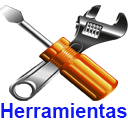
<style>
.page{position:relative;width:128px;height:128px;background:#ffffff}
.page>*{position:absolute;margin:0}
.t1{font:20px "Arial-BoldMT";color:#0d18f3}
</style>
<div class="page">
<p class="t1" style="left:1px;top:103px;width:126px;height:15px">Herramientas</p>
</div>
